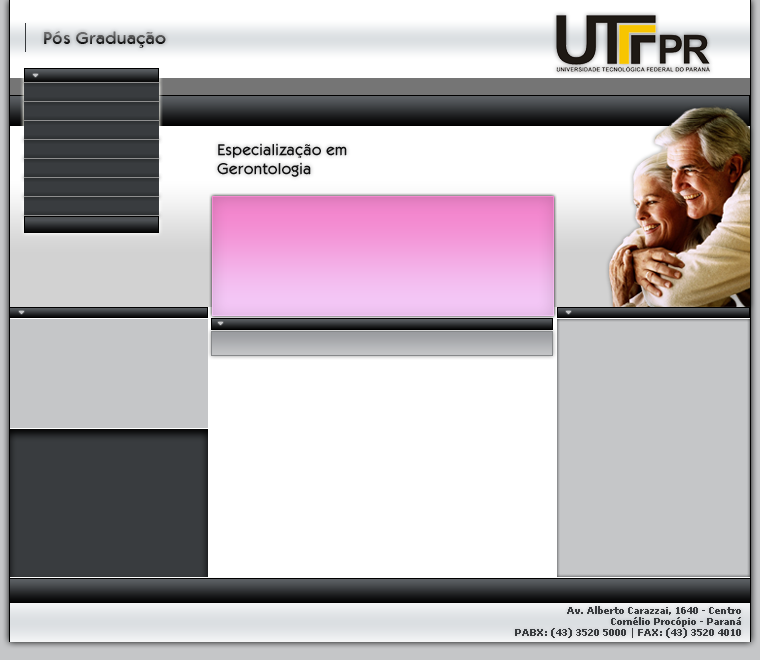
<style>
.page{position:relative;width:760px;height:660px;background:#ffffff}
.page>*{position:absolute;margin:0}
.t1{font:18px "Kabob"}
.t2{font:16px "KabobRegular";color:#0e0e0f}
.t3{font:9px "Verdana-Bold";color:#393c3f}
</style>
<div class="page">
<p class="t1" style="left:44px;top:31px;width:122px;height:17px">Pós Graduação</p>
<p class="t2" style="left:217px;top:143px;width:130px;height:34px">Especialização em <br>Gerontologia</p>
<p class="t3" style="left:515px;top:606px;width:226px;height:32px;text-align:right">Av. Alberto Carazzai, 1640 - Centro<br>Cornélio Procópio - Paraná<br>PABX: (43) 3520 5000 | FAX: (43) 3520 4010</p>
</div>
